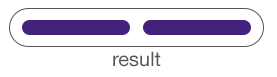
<style>
.page{position:relative;width:277px;height:77px;background:#ffffff}
.page>*{position:absolute;margin:0}
.t1{font:20px "HelveticaNeue";color:#555555}
</style>
<div class="page">
<p class="t1" style="left:113px;top:51px;width:48px;height:16px">result</p>
</div>
